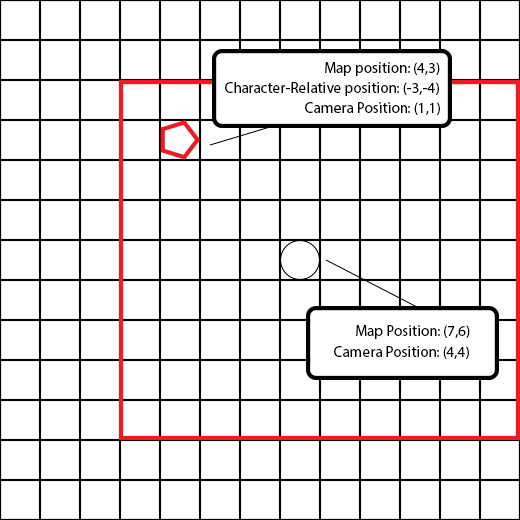
<style>
.page{position:relative;width:520px;height:520px;background:#ffffff}
.page>*{position:absolute;margin:0}
.t1{font:15px "MyriadPro-Regular";color:#000000}
</style>
<div class="page">
<p class="t1" style="left:325px;top:62px;width:115px;height:14px">Map position: (4,3)</p>
<p class="t1" style="left:225px;top:82px;width:214px;height:14px">Character-Relative position: (-3,-4)</p>
<p class="t1" style="left:305px;top:102px;width:135px;height:13px">Camera Position: (1,1)</p>
<p class="t1" style="left:356px;top:325px;width:114px;height:14px">Map Position: (7,6)</p>
<p class="t1" style="left:334px;top:346px;width:135px;height:13px">Camera Position: (4,4)</p>
</div>
